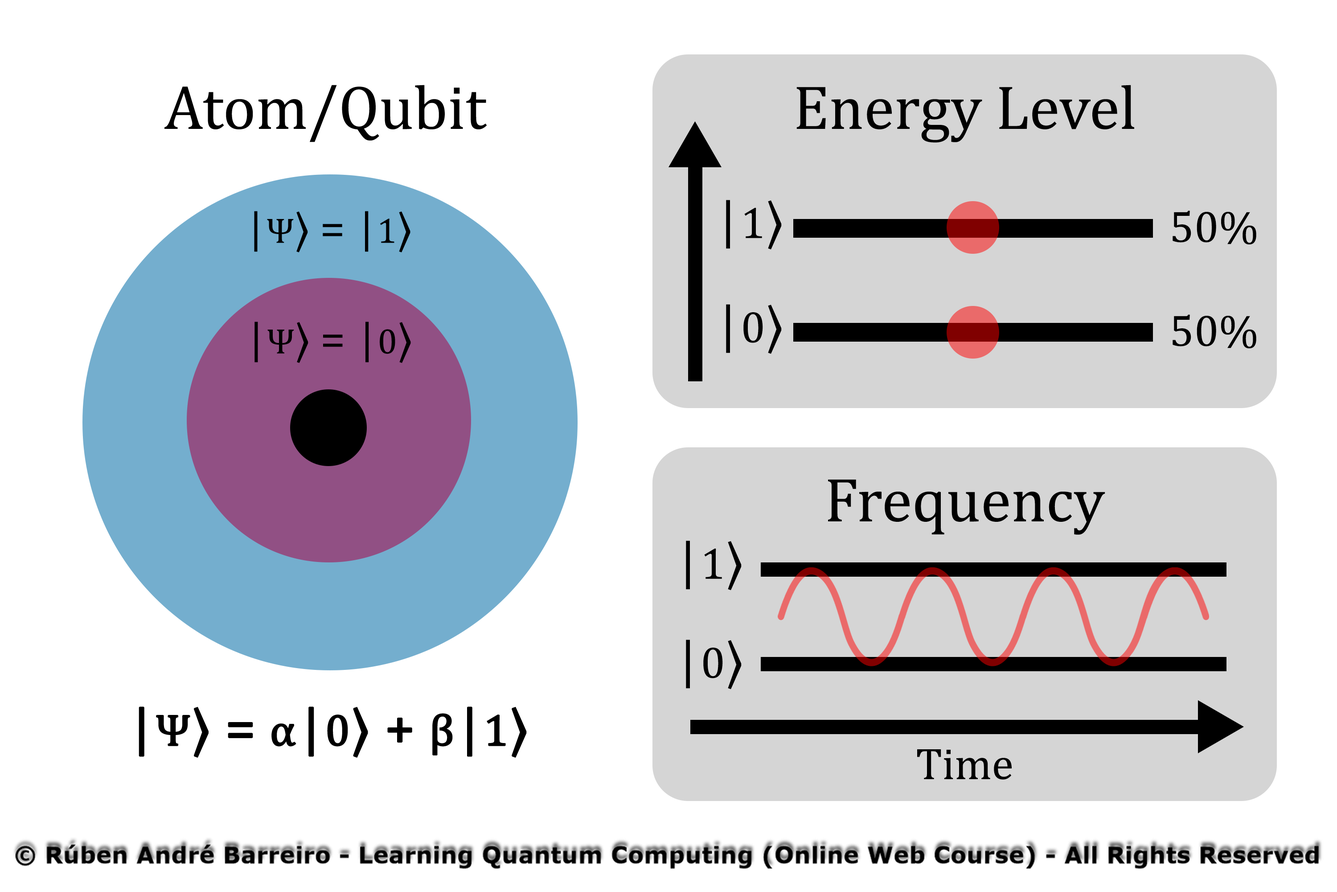
<style>
.page{position:relative;width:1337px;height:892px;background:#ffffff}
.page>*{position:absolute;margin:0}
.t1{font:62.4px "Cambria";color:#000000}
.t2{font:53.5px "SitkaSmall-Italic";color:#000000}
.t3{font:44.6px "Cambria";color:#000000}
.t4{font:53.5px "Cambria";color:#000000}
.t5{font:44.6px "SitkaSmall-Italic";color:#000000}
.t6{font:35.7px "Cambria";color:#000000}
.t7{font:53.5px "Cambria";color:#000000;font-weight:bold}
.t8{font:53.5px "SitkaSmall-Italic";color:#000000;font-weight:bold}
.t9{font:44.6px "Cambria";color:#000000;font-weight:bold}
</style>
<div class="page">
<p class="t1" style="left:165px;top:85px;width:322px;height:57px">Atom/Qubit</p>
<p class="t1" style="left:797px;top:85px;width:338px;height:58px">Energy Level</p>
<p class="t2" style="left:726px;top:200px;width:56px;height:50px">|<span class="t3">1</span><span class="t4">⟩</span></p>
<p class="t3" style="left:254px;top:211px;width:157px;height:41px"><span class="t5">|</span><span class="t6">Ψ</span>⟩ = <span class="t5">|</span><span class="t6">1</span>⟩</p>
<p class="t3" style="left:1173px;top:210px;width:84px;height:34px">50%</p>
<p class="t2" style="left:726px;top:304px;width:56px;height:50px">|<span class="t3">0</span><span class="t4">⟩</span></p>
<p class="t3" style="left:1173px;top:314px;width:84px;height:34px">50%</p>
<p class="t3" style="left:255px;top:321px;width:156px;height:42px"><span class="t5">|</span><span class="t6">Ψ</span>⟩ = <span class="t5">|</span><span class="t6">0</span>⟩</p>
<p class="t1" style="left:828px;top:479px;width:278px;height:56px">Frequency</p>
<p class="t2" style="left:686px;top:540px;width:56px;height:50px">|<span class="t3">1</span><span class="t4">⟩</span></p>
<p class="t2" style="left:686px;top:639px;width:56px;height:50px">|<span class="t3">0</span><span class="t4">⟩</span></p>
<p class="t7" style="left:139px;top:706px;width:388px;height:51px"><span class="t8">|</span><span class="t9">Ψ</span>⟩ = <span class="t9">α</span><span class="t8">|</span><span class="t9">0</span>⟩ + <span class="t9">β</span><span class="t8">|</span><span class="t9">1</span>⟩</p>
<p class="t3" style="left:917px;top:749px;width:95px;height:30px">Time</p>
</div>
